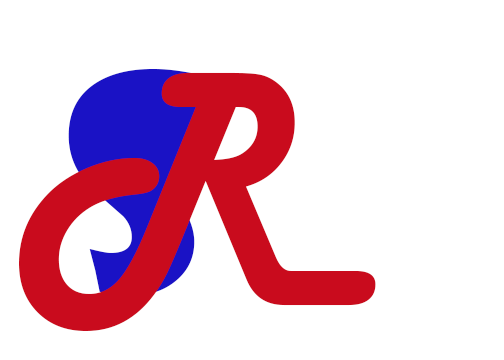
<style>
.page{position:relative;width:504px;height:360px;background:#ffffff}
.page>*{position:absolute;margin:0}
.t1{font:290px "HarlowSolid";color:#c90b1d}
.t2{font:290px "ShowcardGothic-Reg"}
</style>
<div class="page">
<p class="t1" style="left:19px;top:72px;width:357px;height:259px">R</p>
<p class="t2" style="left:68px;top:68px;width:137px;height:227px">S</p>
</div>
